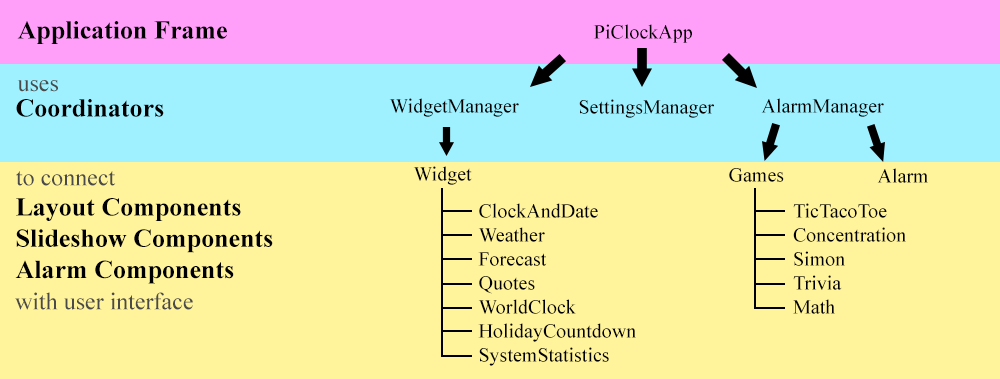
<style>
.page{position:relative;width:1000px;height:379px;background:#fff39c}
.page>*{position:absolute;margin:0}
.t1{font:26px "TimesNewRomanPS-BoldMT";color:#000000}
.t2{font:20px "TimesNewRomanPSMT";color:#000000}
.t3{font:24px "TimesNewRomanPSMT";color:#4a4a4a}
</style>
<div class="page">
<p class="t1" style="left:17px;top:21px;width:210px;height:23px">Application Frame</p>
<p class="t2" style="left:593px;top:24px;width:99px;height:19px">PiClockApp</p>
<p class="t3" style="left:17px;top:80px;width:41px;height:12px">uses</p>
<p class="t1" style="left:16px;top:99px;width:148px;height:18px">Coordinators</p>
<p class="t2" style="left:389px;top:98px;width:130px;height:19px">WidgetManager</p>
<p class="t2" style="left:579px;top:99px;width:135px;height:19px">SettingsManager</p>
<p class="t2" style="left:761px;top:98px;width:123px;height:19px">AlarmManager</p>
<p class="t3" style="left:16px;top:171px;width:100px;height:15px">to connect</p>
<p class="t2" style="left:413px;top:166px;width:59px;height:19px">Widget</p>
<p class="t2" style="left:729px;top:168px;width:55px;height:14px">Games</p>
<p class="t2" style="left:877px;top:168px;width:51px;height:15px">Alarm</p>
<p class="t1" style="left:15px;top:198px;width:258px;height:86px">Layout Components<br>Slideshow Components<br>Alarm Components</p>
<p class="t2" style="left:478px;top:203px;width:158px;height:163px">ClockAndDate<br>Weather<br>Forecast<br>Quotes<br>WorldClock<br>HolidayCountdown<br>SystemStatistics</p>
<p class="t2" style="left:793px;top:203px;width:113px;height:111px">TicTacoToe<br>Concentration<br>Simon<br>Trivia<br>Math</p>
<p class="t3" style="left:15px;top:292px;width:178px;height:18px">with user interface</p>
</div>
